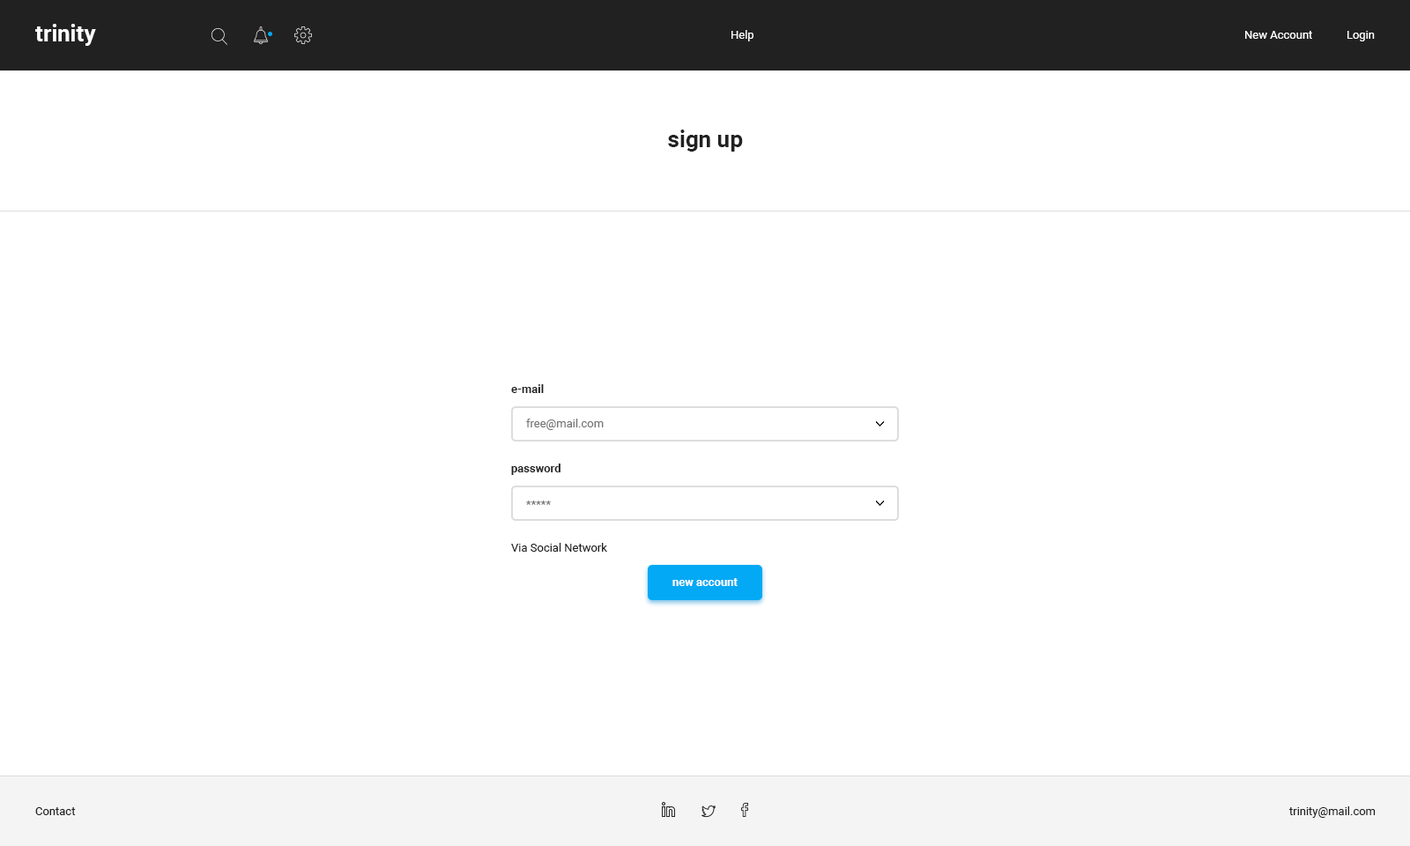
<style>
.page{position:relative;width:1410px;height:846px;background:#ffffff}
.page>*{position:absolute;margin:0}
.t1{font:22.9px "Roboto-Bold";color:#ffffff}
.t2{font:11.5px "Roboto-Regular";color:#ffffff}
.t3{font:22.9px "Roboto-Bold";color:#212121}
.t4{font:11.5px "Roboto-Bold";color:#212121}
.t5{font:11.5px "Roboto-Regular";color:#757575}
.t6{font:11.5px "Roboto-Regular";color:#212121}
.t7{font:11.5px "Roboto-Bold";color:#ffffff}
</style>
<div class="page">
<p class="t1" style="left:35px;top:24px;width:61px;height:22px">trinity</p>
<p class="t2" style="left:731px;top:30px;width:22px;height:11px">Help</p>
<p class="t2" style="left:1245px;top:31px;width:130px;height:10px">New Account            Login</p>
<p class="t3" style="left:668px;top:130px;width:75px;height:22px">sign up</p>
<p class="t4" style="left:511px;top:384px;width:33px;height:9px">e-mail</p>
<p class="t5" style="left:526px;top:419px;width:78px;height:11px">free@mail.com</p>
<p class="t4" style="left:511px;top:463px;width:49px;height:12px">password</p>
<p class="t5" style="left:526px;top:500px;width:25px;height:5px">*****</p>
<p class="t6" style="left:511px;top:543px;width:96px;height:9px">Via Social Network</p>
<p class="t7" style="left:672px;top:578px;width:65px;height:8px">new account</p>
<p class="t6" style="left:35px;top:807px;width:41px;height:8px">Contact</p>
<p class="t6" style="left:1288px;top:806px;width:87px;height:12px">trinity@mail.com</p>
</div>
